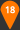
<style>
.page{position:relative;width:20px;height:30px;background:#ff7800}
.page>*{position:absolute;margin:0}
.t1{font:9px "OpenSans";color:#ffffff;font-weight:bold}
</style>
<div class="page">
<p class="t1" style="left:5px;top:6px;width:10px;height:8px">18</p>
</div>
